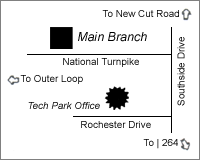
<style>
.page{position:relative;width:200px;height:160px;background:#ffffff}
.page>*{position:absolute;margin:0}
.t1{font:9.9px "ArialMT";color:#000000}
.t2{font:12.5px "Arial-ItalicMT";color:#000000}
.t3{font:9.9px "ArialMT"}
.t4{font:9.9px "Arial-ItalicMT"}
</style>
<div class="page">
<p class="t1" style="left:102px;top:10px;width:77px;height:7px">To New Cut Road</p>
<p class="t2" style="left:78px;top:32px;width:69px;height:10px">Main Branch</p>
<p class="t3" style="left:177px;top:37px;width:8px;height:69px;rotate:-90deg">Southside Drive</p>
<p class="t3" style="left:63px;top:58px;width:76px;height:9px">National Turnpike</p>
<p class="t3" style="left:20px;top:75px;width:63px;height:9px">To Outer Loop</p>
<p class="t4" style="left:28px;top:102px;width:72px;height:7px">Tech Park Office</p>
<p class="t3" style="left:81px;top:121px;width:70px;height:7px">Rochester Drive</p>
<p class="t3" style="left:143px;top:139px;width:35px;height:10px">To | 264</p>
</div>
